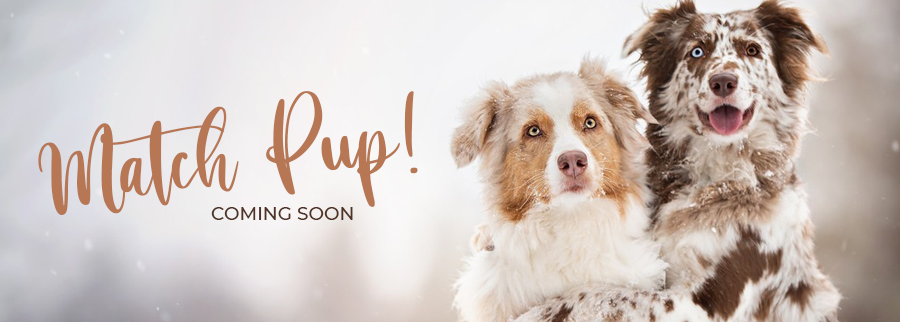
<style>
.page{position:relative;width:900px;height:322px}
.page>*{position:absolute;margin:0}
.t1{font:111.3px "Sibertha";color:#b77754}
.t2{font:18.9px "Montserrat-Medium";color:#4f3224}
</style>
<div class="page">
<p class="t1" style="left:38px;top:91px;width:380px;height:124px;rotate:-7deg">Match Pup!</p>
<p class="t2" style="left:211px;top:207px;width:142px;height:13px">COMING SOON</p>
</div>
